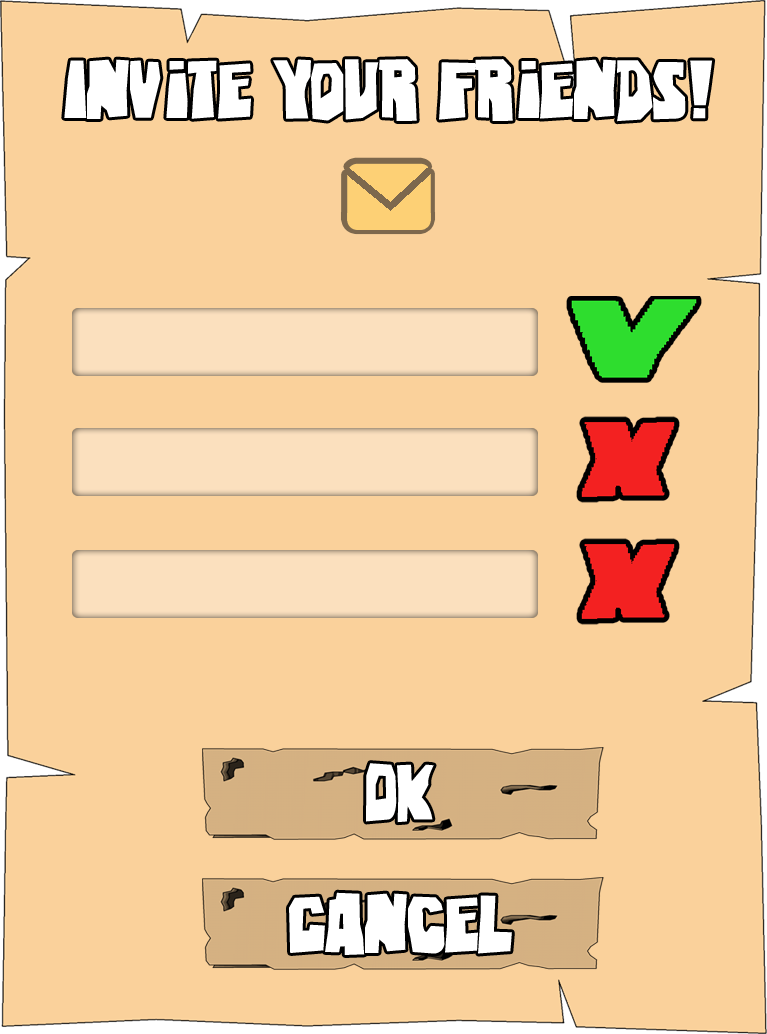
<style>
.page{position:relative;width:767px;height:1034px;background:#fad19b}
.page>*{position:absolute;margin:0}
.t1{font:72px "Eastwood";color:#ffffff}
</style>
<div class="page">
<p class="t1" style="left:64px;top:59px;width:649px;height:63px">Invite Your Friends!</p>
<p class="t1" style="left:366px;top:763px;width:68px;height:60px">Ok</p>
<p class="t1" style="left:289px;top:892px;width:223px;height:63px">Cancel</p>
</div>
